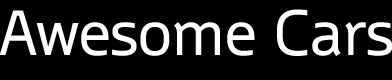
<style>
.page{position:relative;width:392px;height:80px;background:#000000}
.page>*{position:absolute;margin:0}
.t1{font:60.4px "WascoSans";letter-spacing:-0.025em;color:#ffffff}
</style>
<div class="page">
<p class="t1" style="left:0px;top:9px;width:392px;height:47px">Awesome Cars</p>
</div>
